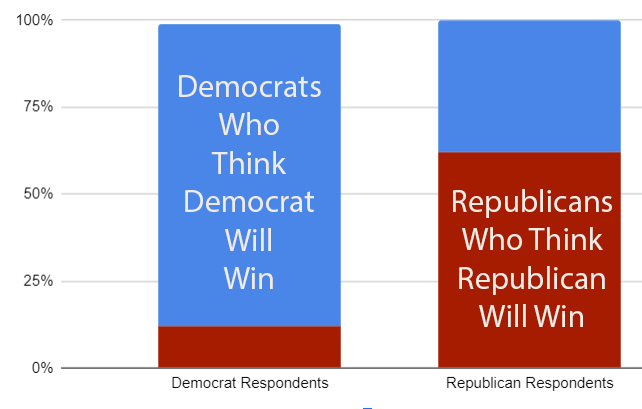
<style>
.page{position:relative;width:642px;height:409px;background:#ffffff}
.page>*{position:absolute;margin:0}
.t1{font:32px "MyriadPro-Regular";color:#efece5}
</style>
<div class="page">
<p class="t1" style="left:179px;top:75px;width:142px;height:214px;text-align:center">Democrats<br>Who<br>Think<br>Democrat<br>Will<br>Win</p>
<p class="t1" style="left:453px;top:189px;width:159px;height:138px;text-align:center">Republicans<br>Who Think<br>Republican<br>Will Win</p>
</div>
